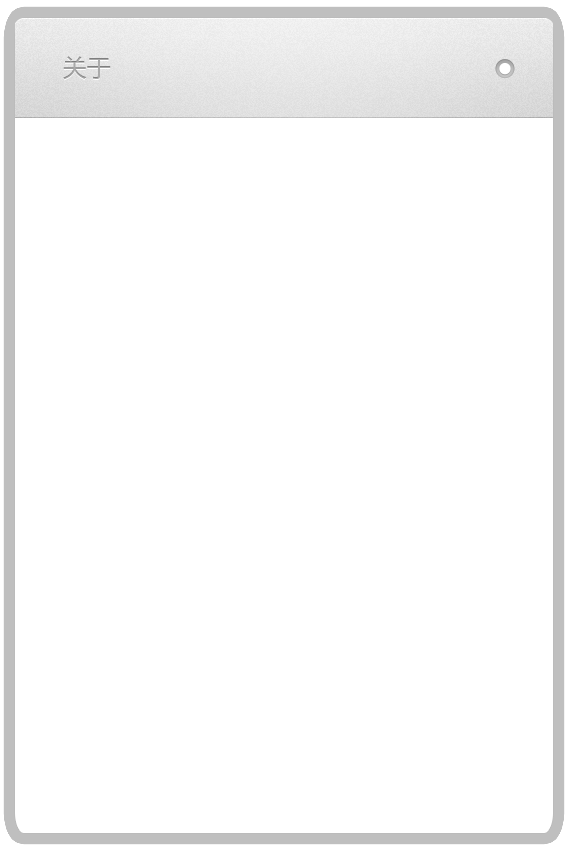
<style>
.page{position:relative;width:567px;height:850px;background:#ffffff}
.page>*{position:absolute;margin:0}
.t1{font:24px "MicrosoftYaHei";color:#aaaaaa}
</style>
<div class="page">
<p class="t1" style="left:63px;top:56px;width:48px;height:24px">关于</p>
</div>
